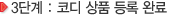
<style>
.page{position:relative;width:180px;height:18px;background:#ffffff}
.page>*{position:absolute;margin:0}
.t1{font:14.7px "YDIYGO330";letter-spacing:-0.03em;color:#373737;scale:0.92 1}
</style>
<div class="page">
<p class="t1" style="left:11px;top:1px;width:156px;height:14px">3단계 : 코디 상품 등록 완료</p>
</div>
